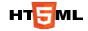
<style>
.page{position:relative;width:88px;height:31px;background:#ffffff}
.page>*{position:absolute;margin:0}
.t1{font:13.9px "Swiss721BT-BlackExtended";color:#000000}
</style>
<div class="page">
<p class="t1" style="left:9px;top:10px;width:74px;height:10px">HT   ML</p>
</div>
